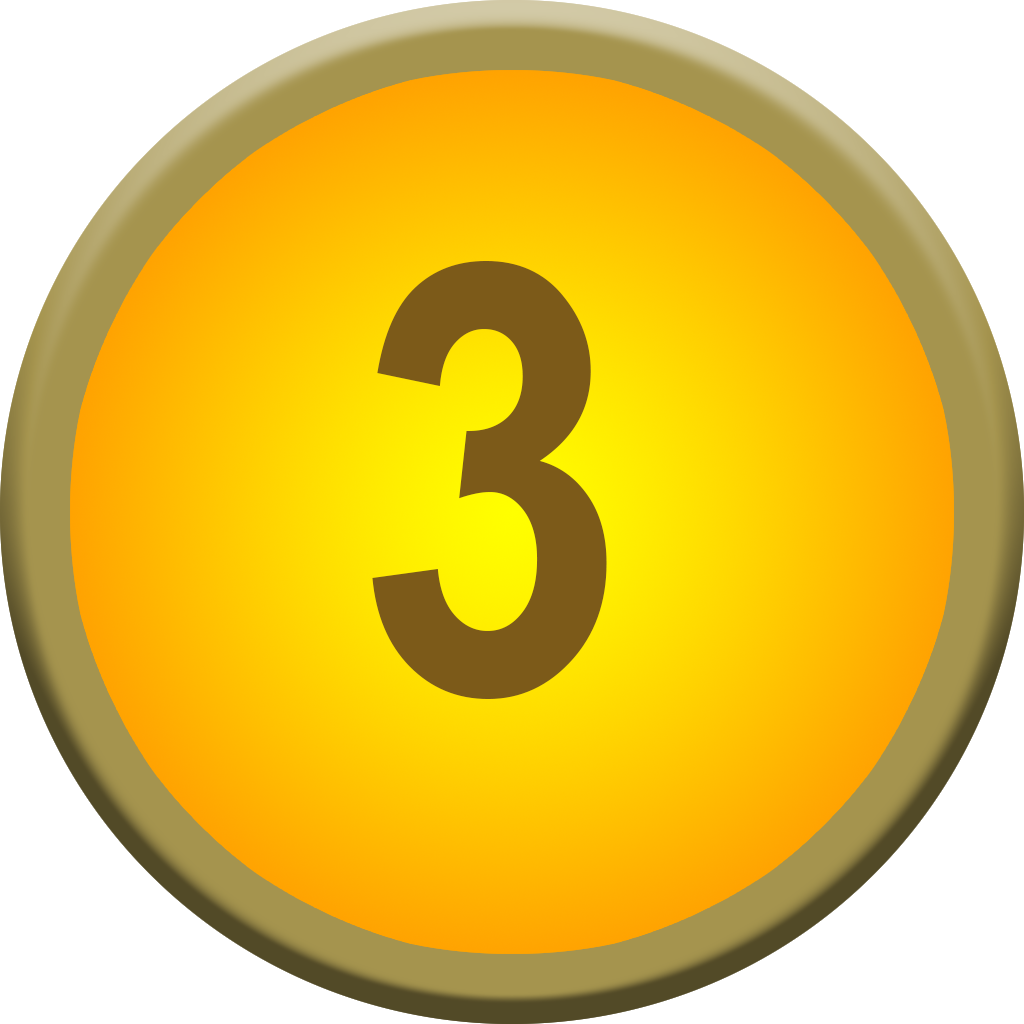
<style>
.page{position:relative;width:1024px;height:1024px;background:#ffffff}
.page>*{position:absolute;margin:0}
.t1{font:600px "ArialNarrow-Bold";color:#7c5a19}
</style>
<div class="page">
<p class="t1" style="left:372px;top:261px;width:235px;height:438px">3</p>
</div>
